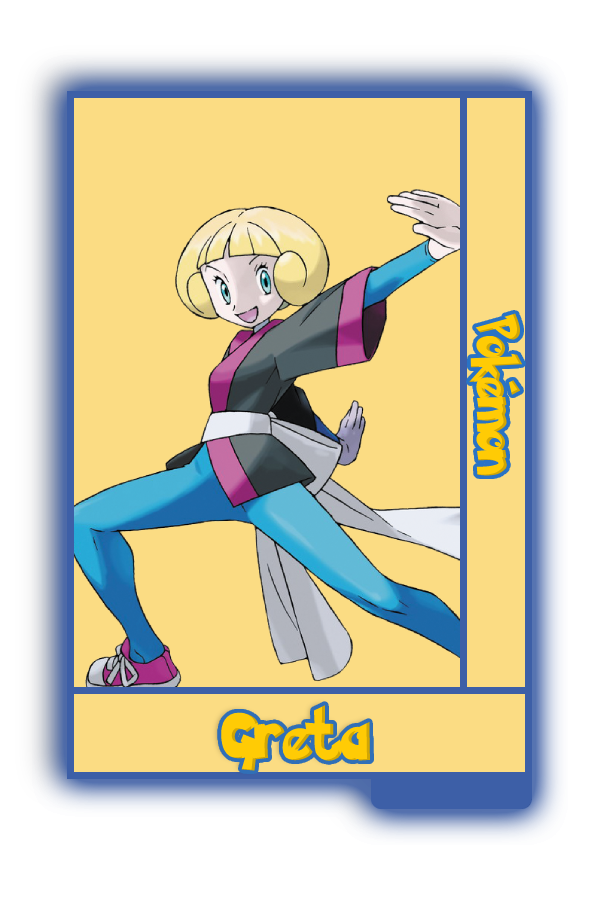
<style>
.page{position:relative;width:600px;height:900px;background:#fbdc83}
.page>*{position:absolute;margin:0}
.t1{font:48.8px "PokemonSolidNormal";color:#ffcb05;scale:0.8 1}
.t2{font:56.6px "PokemonSolidNormal";color:#ffcb05;scale:0.92 1}
</style>
<div class="page">
<p class="t1" style="left:469px;top:313px;width:54px;height:163px;rotate:90deg">Pokémon</p>
<p class="t2" style="left:221px;top:705px;width:149px;height:66px">Greta</p>
</div>
